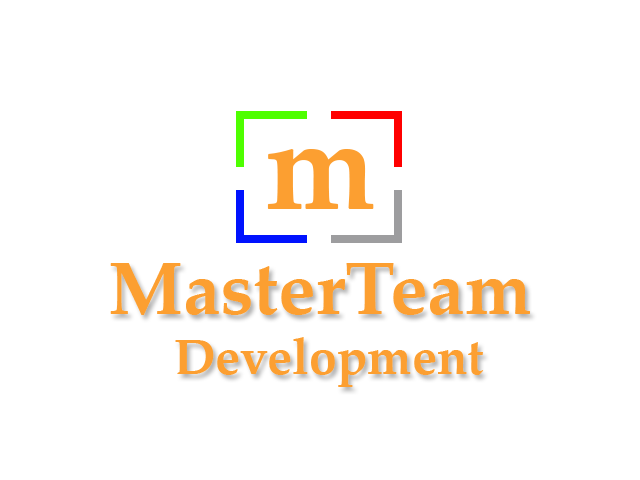
<style>
.page{position:relative;width:640px;height:480px;background:#ffffff}
.page>*{position:absolute;margin:0}
.t1{font:125px "PalatinoLinotype-Bold";color:#fc9f31}
.t2{font:50px "PalatinoLinotype-Bold";color:#fc9f31}
.t3{font:75px "PalatinoLinotype-Bold";color:#fc9f31}
</style>
<div class="page">
<p class="t1" style="left:267px;top:149px;width:107px;height:60px">m</p>
<p class="t2" style="left:110px;top:263px;width:420px;height:124px;text-align:center"><span class="t3">MasterTeam <br></span>Development</p>
</div>
